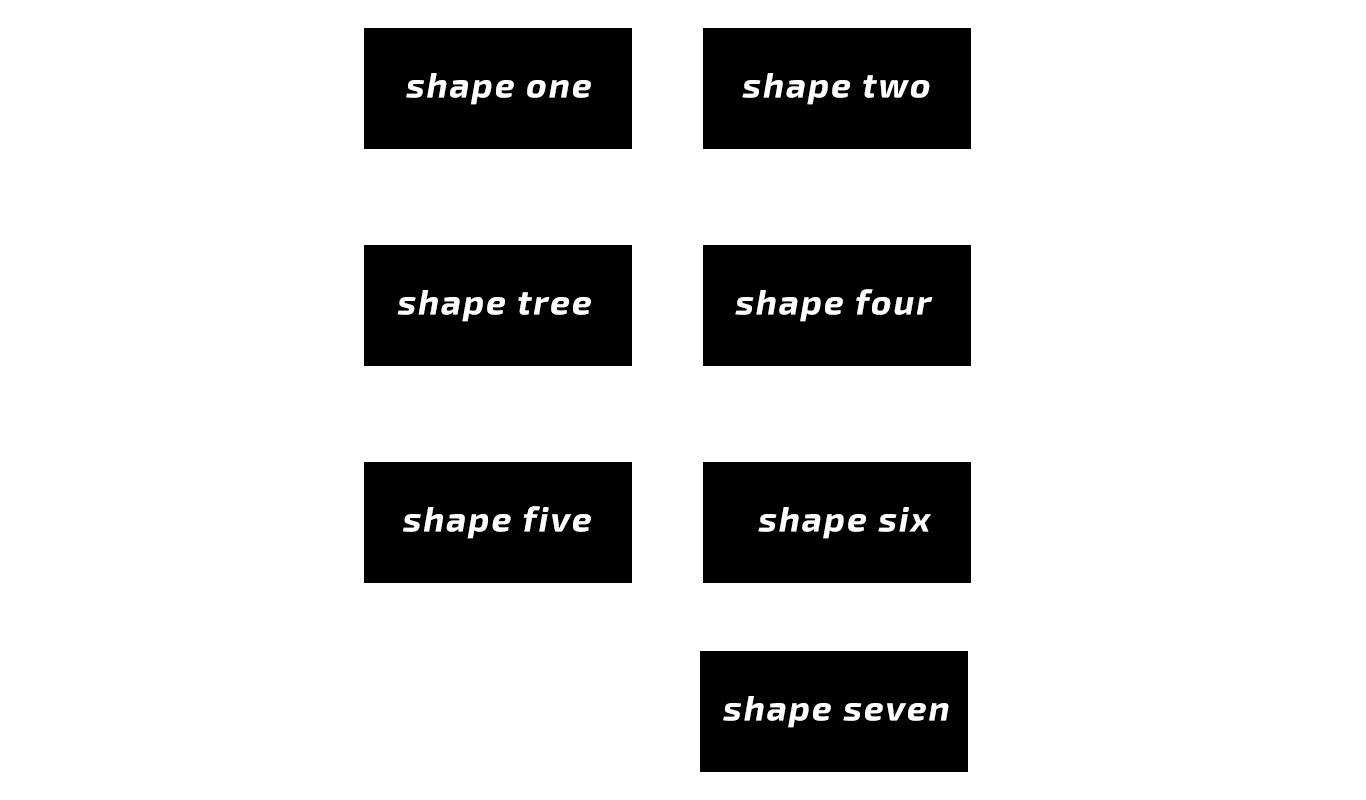
<style>
.page{position:relative;width:1366px;height:800px;background:#ffffff}
.page>*{position:absolute;margin:0}
.t1{font:35px "Exo2-Bold";letter-spacing:0.06em;color:#ffffff;font-style:italic}
.t2{font:35px "Exo2-Bold";letter-spacing:0.06em;font-style:italic}
</style>
<div class="page">
<p class="t1" style="left:406px;top:73px;width:185px;height:32px">shape one</p>
<p class="t1" style="left:406px;top:73px;width:185px;height:32px">shape one</p>
<p class="t1" style="left:406px;top:73px;width:185px;height:32px">shape one</p>
<p class="t1" style="left:406px;top:73px;width:185px;height:32px">shape one</p>
<p class="t1" style="left:406px;top:73px;width:185px;height:32px">shape one</p>
<p class="t1" style="left:406px;top:73px;width:185px;height:32px">shape one</p>
<p class="t1" style="left:742px;top:73px;width:188px;height:32px">shape two</p>
<p class="t1" style="left:745px;top:73px;width:185px;height:32px">shape one</p>
<p class="t1" style="left:745px;top:73px;width:185px;height:32px">shape one</p>
<p class="t1" style="left:745px;top:73px;width:185px;height:32px">shape one</p>
<p class="t1" style="left:745px;top:73px;width:185px;height:32px">shape one</p>
<p class="t1" style="left:397px;top:290px;width:194px;height:32px">shape tree</p>
<p class="t1" style="left:735px;top:289px;width:198px;height:33px">shape four</p>
<p class="t1" style="left:403px;top:506px;width:188px;height:33px">shape five</p>
<p class="t2" style="left:406px;top:507px;width:185px;height:32px">shape one</p>
<p class="t1" style="left:758px;top:507px;width:173px;height:32px">shape six</p>
<p class="t1" style="left:723px;top:696px;width:226px;height:32px">shape seven</p>
</div>
